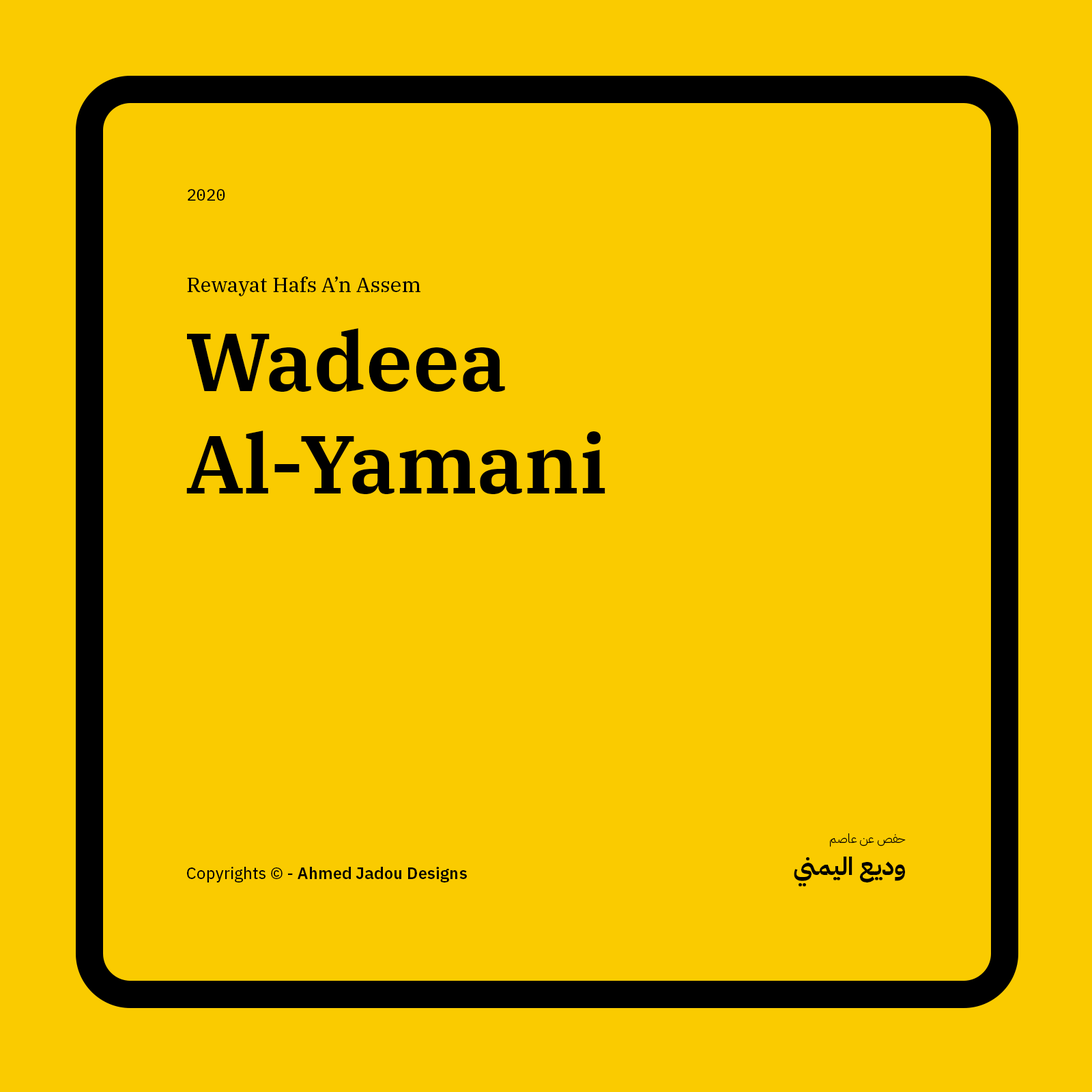
<style>
.page{position:relative;width:1092px;height:1092px;background:#facb00}
.page>*{position:absolute;margin:0}
.t1{font:16.4px "IBMPlexMono-Text";color:#000000}
.t2{font:20.5px "IBMPlexSerif-Text";color:#000000}
.t3{font:81.9px/102.7px "IBMPlexSerif-SemiBold";color:#000000}
.t4{font:12.3px "IBMPlexArabic-Light";color:#000000}
.t5{font:24.6px "IBMPlexArabic-Bold";color:#000000}
.t6{font:16.4px "IBMPlexSans-SemiBold";color:#000000}
.t7{font:16.4px "IBMPlexSans-Text";color:#000000}
</style>
<div class="page">
<p class="t1" style="left:188px;top:189px;width:37px;height:12px">2020</p>
<p class="t2" style="left:187px;top:276px;width:233px;height:20px">Rewayat Hafs A’n Assem</p>
<p class="t3" style="left:186px;top:328px;width:419px;height:166px">Wadeea Al-Yamani</p>
<p class="t4" style="left:830px;top:833px;width:76px;height:14px">حفص عن عاصم</p>
<p class="t5" style="left:794px;top:857px;width:111px;height:30px">وديع اليمني</p>
<p class="t6" style="left:187px;top:867px;width:280px;height:15px"><span class="t7">Copyrights © - </span>Ahmed Jadou Designs</p>
</div>
